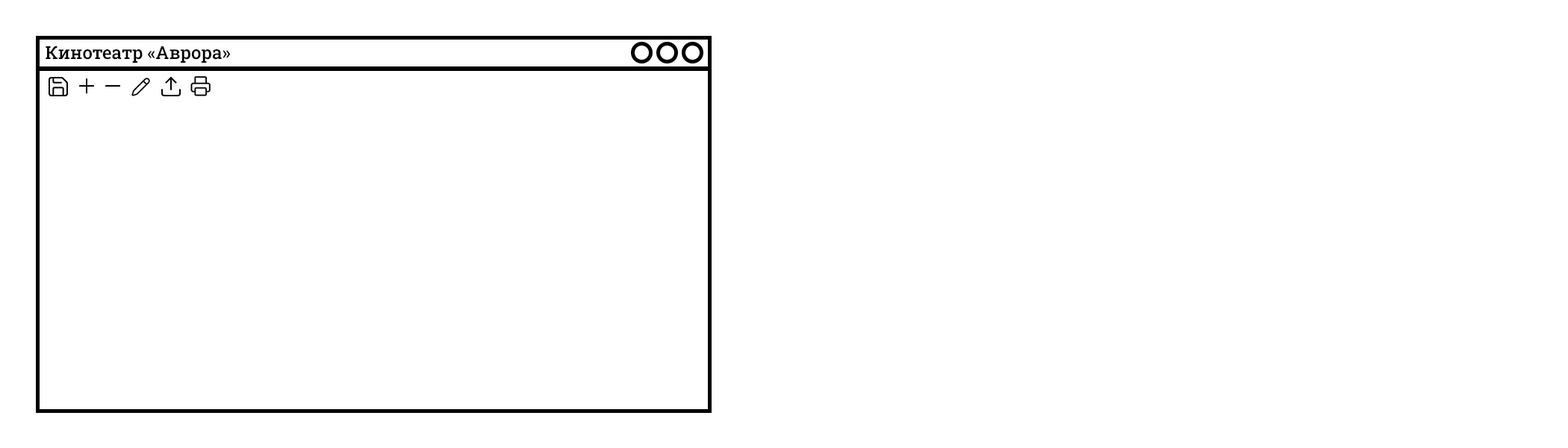
<style>
.page{position:relative;width:1568px;height:448px;background:#ffffff}
.page>*{position:absolute;margin:0}
.t1{font:17.9px "RobotoSlab-Medium";color:#000000}
</style>
<div class="page">
<p class="t1" style="left:46px;top:46px;width:185px;height:17px">Кинотеатр «Аврора»</p>
</div>
